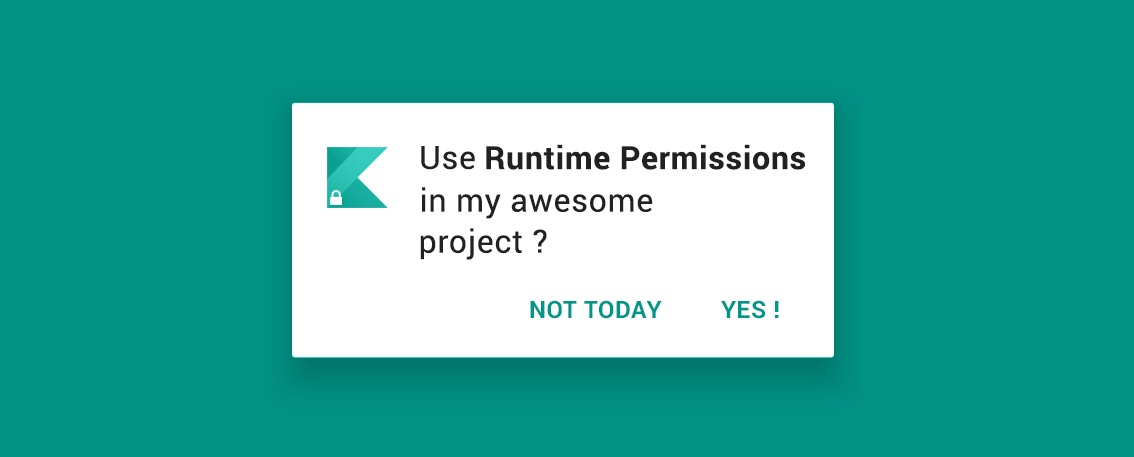
<style>
.page{position:relative;width:1134px;height:457px;background:#019284}
.page>*{position:absolute;margin:0}
.t1{font:32px "Roboto-Regular";letter-spacing:0.023em;color:#212121}
.t2{font:32px "Roboto-Bold";letter-spacing:0.023em;color:#212121}
.t3{font:24px "Roboto-Bold";letter-spacing:0.023em;color:#009688}
</style>
<div class="page">
<p class="t1" style="left:421px;top:146px;width:54px;height:24px">Use</p>
<p class="t2" style="left:486px;top:144px;width:319px;height:26px">Runtime Permissions</p>
<p class="t1" style="left:422px;top:187px;width:231px;height:32px">in my awesome</p>
<p class="t1" style="left:420px;top:228px;width:127px;height:32px">project ?</p>
<p class="t3" style="left:530px;top:300px;width:132px;height:19px">NOT TODAY</p>
<p class="t3" style="left:721px;top:300px;width:58px;height:19px">YES !</p>
</div>
